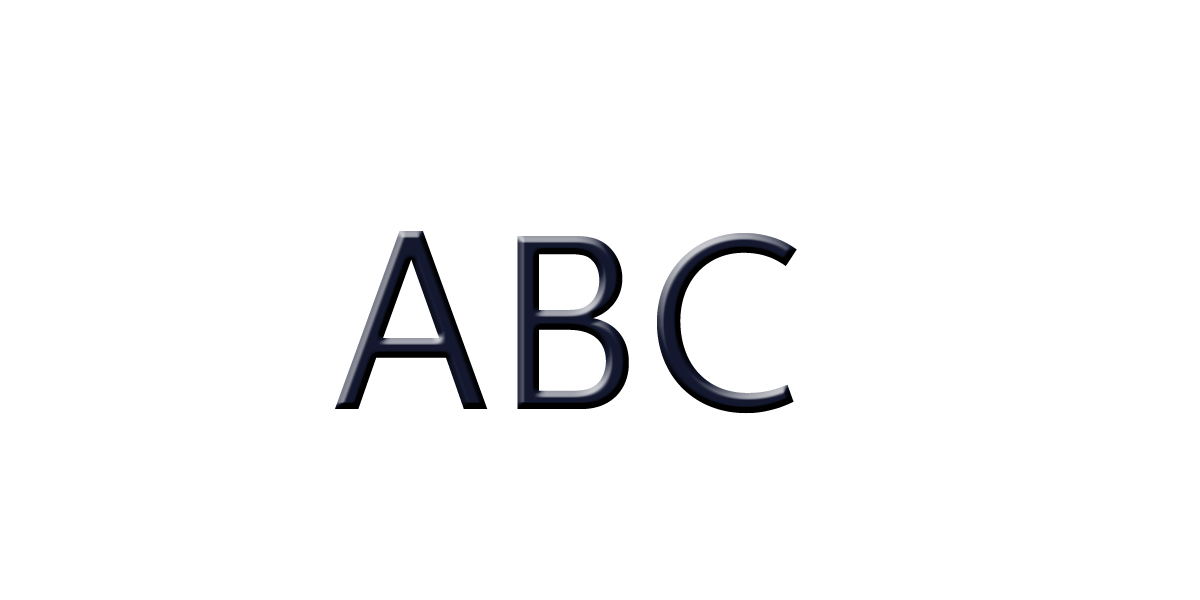
<style>
.page{position:relative;width:1200px;height:600px;background:#ffffff}
.page>*{position:absolute;margin:0}
.t1{font:262.5px "ScalaSansOT-Regular"}
</style>
<div class="page">
<p class="t1" style="left:335px;top:231px;width:462px;height:183px">ABC</p>
</div>
